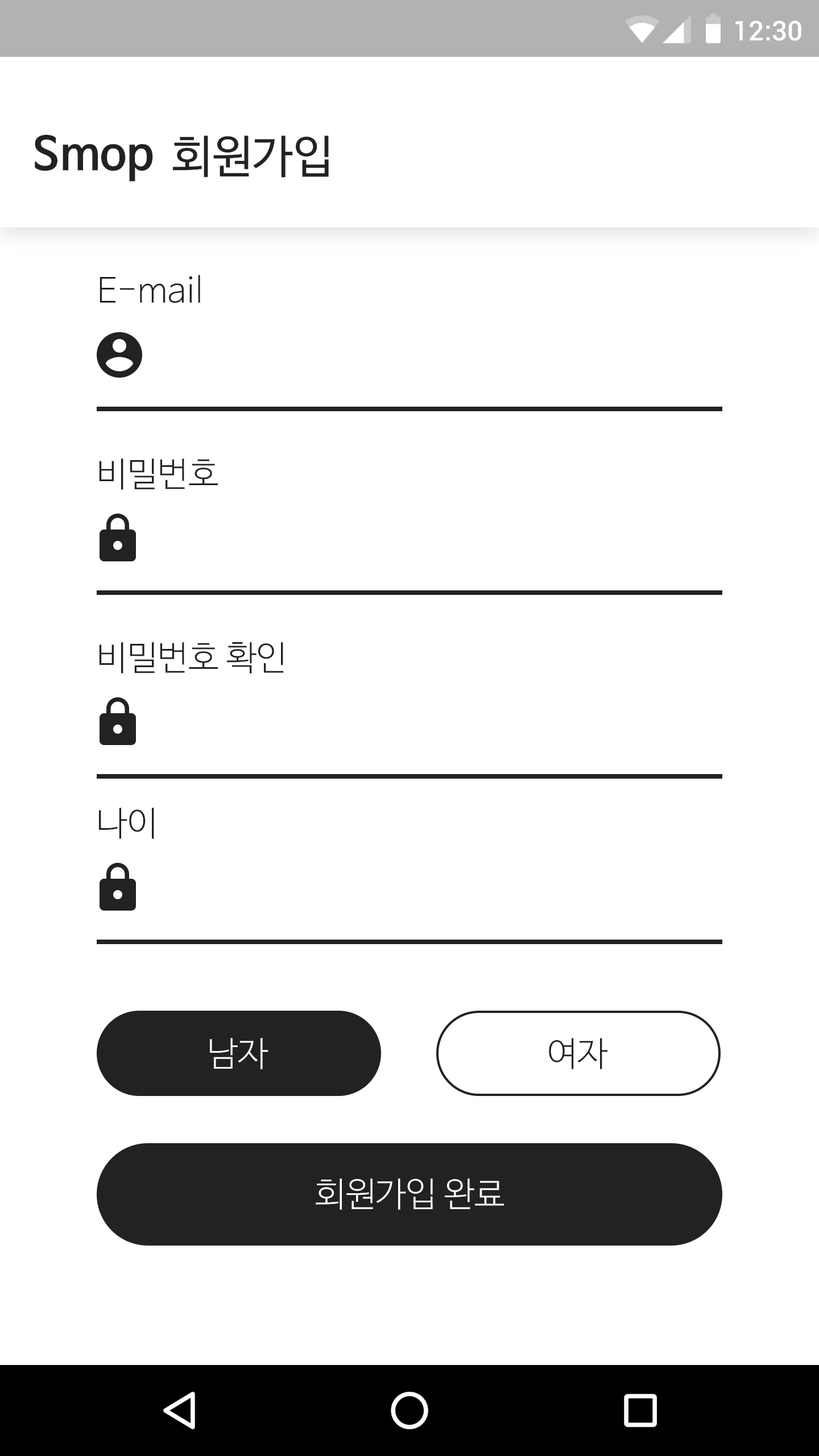
<style>
.page{position:relative;width:819px;height:1456px;background:#ffffff}
.page>*{position:absolute;margin:0}
.t1{font:27.3px "Roboto-Medium";color:#ffffff}
.t2{font:45.5px "NanumBarunGothicBold";color:#222222}
.t3{font:45.5px "NanumBarunGothic";color:#222222}
.t4{font:34.1px "NanumBarunGothicLight";color:#222222}
.t5{font:34.1px "NanumBarunGothicLight";color:#ffffff}
</style>
<div class="page">
<p class="t1" style="left:735px;top:20px;width:66px;height:21px">12:30</p>
<p class="t2" style="left:35px;top:135px;width:118px;height:46px">Smop</p>
<p class="t3" style="left:173px;top:135px;width:156px;height:42px">회원가입</p>
<p class="t4" style="left:100px;top:275px;width:100px;height:28px">E-mail</p>
<p class="t4" style="left:99px;top:458px;width:119px;height:32px">비밀번호</p>
<p class="t4" style="left:99px;top:642px;width:185px;height:31px">비밀번호 확인</p>
<p class="t4" style="left:99px;top:808px;width:55px;height:31px">나이</p>
<p class="t5" style="left:210px;top:1038px;width:58px;height:31px">남자</p>
<p class="t4" style="left:549px;top:1038px;width:59px;height:31px">여자</p>
<p class="t5" style="left:316px;top:1178px;width:188px;height:32px">회원가입 완료</p>
</div>
